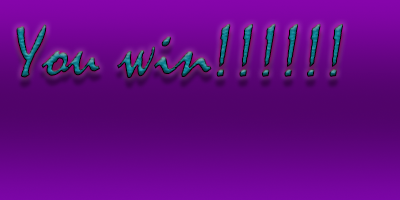
<style>
.page{position:relative;width:400px;height:200px}
.page>*{position:absolute;margin:0}
.t1{font:75px "Mistral"}
</style>
<div class="page">
<p class="t1" style="left:16px;top:23px;width:327px;height:55px">You win!!!!!!</p>
</div>
